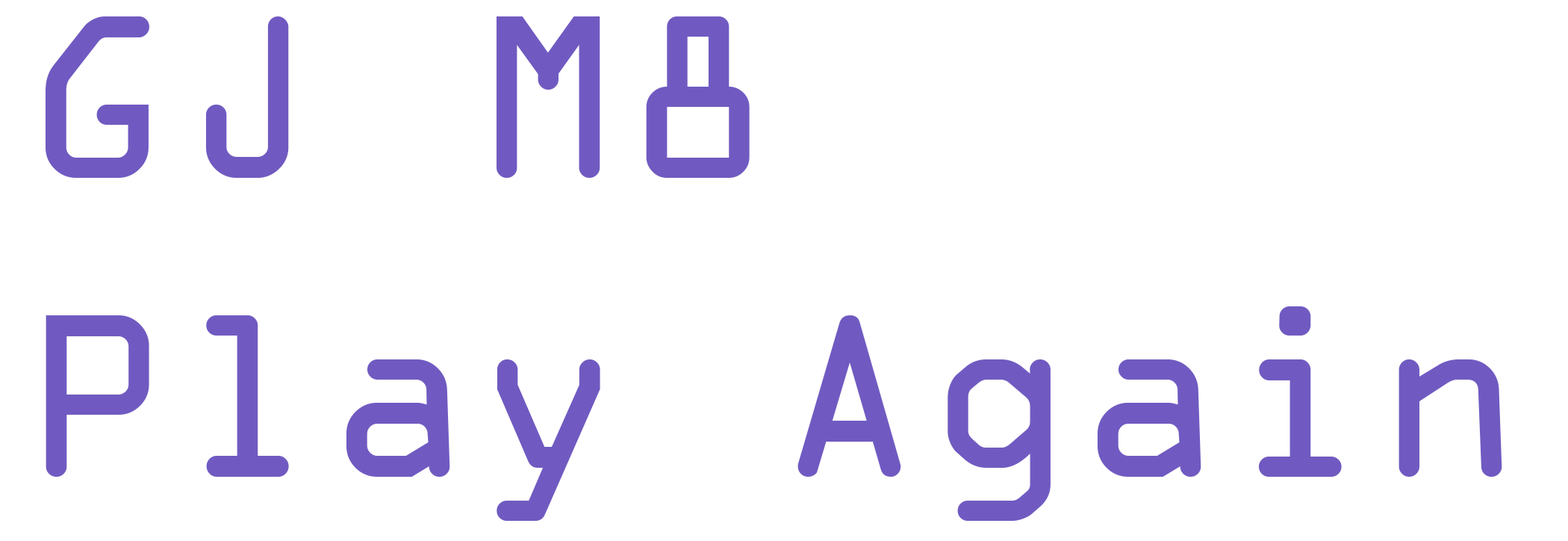
<style>
.page{position:relative;width:1568px;height:541px;background:#ffffff}
.page>*{position:absolute;margin:0}
.t1{font:248.9px "OCRAExtended";color:#705ac1}
</style>
<div class="page">
<p class="t1" style="left:46px;top:16px;width:1456px;height:504px">GJ M8<br>Play Again</p>
</div>
